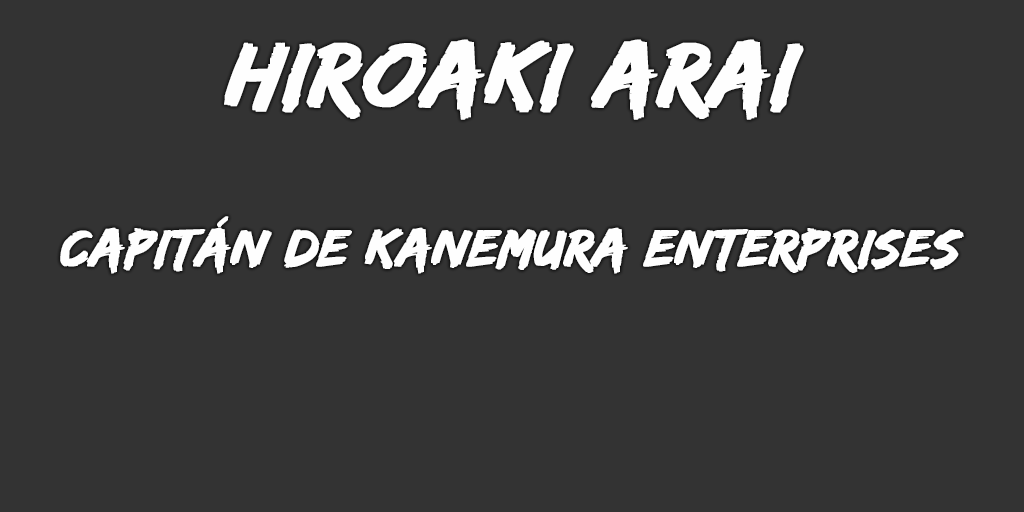
<style>
.page{position:relative;width:1024px;height:512px;background:#333333}
.page>*{position:absolute;margin:0}
.t1{font:95px "EdoSZ";color:#fefefe;font-weight:bold;font-style:italic;scale:1.04 1}
.t2{font:54px "EdoSZ";color:#fefefe;font-weight:bold;font-style:italic;scale:1.04 1}
</style>
<div class="page">
<p class="t1" style="left:224px;top:39px;width:580px;height:81px">hiroaki arai</p>
<p class="t2" style="left:60px;top:216px;width:904px;height:58px">Capitán de Kanemura Enterprises</p>
</div>
